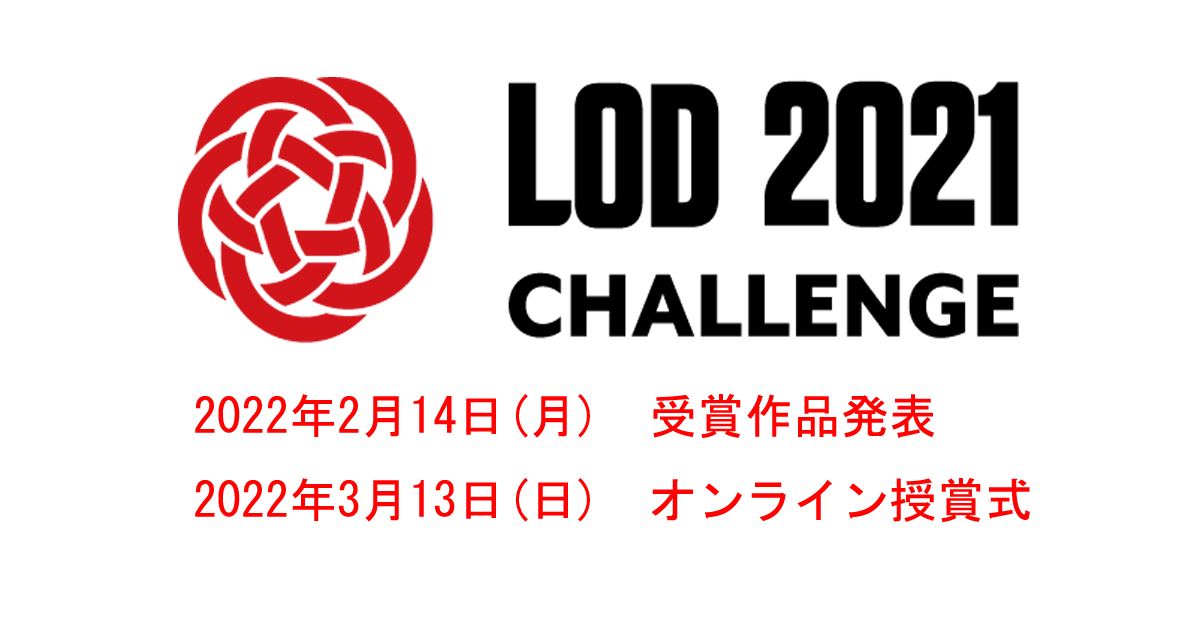
<style>
.page{position:relative;width:1200px;height:630px;background:#ffffff}
.page>*{position:absolute;margin:0}
.t1{font:48px "MS-Gothic";color:#ff0101}
</style>
<div class="page">
<p class="t1" style="left:195px;top:394px;width:835px;height:128px">2022年2月14日(月)　受賞作品発表<br>2022年3月13日(日)　オンライン授賞式</p>
</div>
